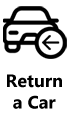
<style>
.page{position:relative;width:68px;height:131px;background:#ffffff}
.page>*{position:absolute;margin:0}
.t1{font:18px "MicrosoftTaiLe-Bold";color:#000000}
</style>
<div class="page">
<p class="t1" style="left:7px;top:74px;width:55px;height:35px;text-align:center">Return<br>a Car</p>
</div>
